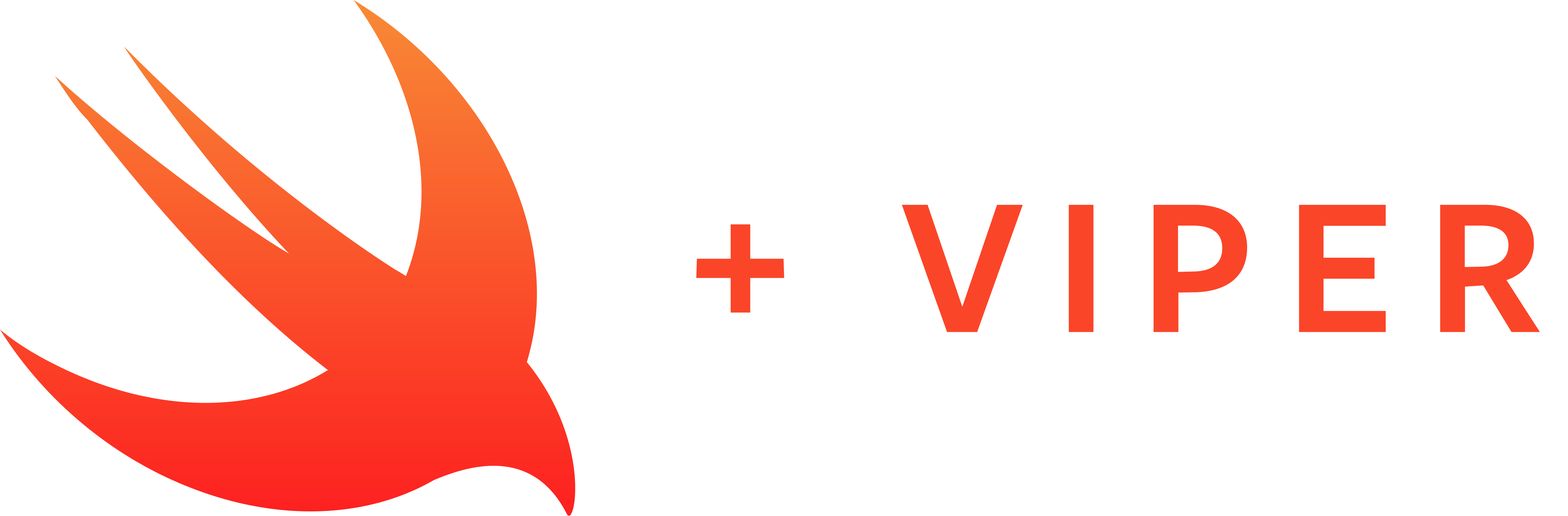
<style>
.page{position:relative;width:1568px;height:516px;background:#ffffff}
.page>*{position:absolute;margin:0}
.t1{font:203.3px "FreightSansProSemibold-Regular";letter-spacing:0.15em;color:#fb4528}
</style>
<div class="page">
<p class="t1" style="left:902px;top:205px;width:638px;height:127px">VIPER</p>
<p class="t1" style="left:696px;top:224px;width:88px;height:88px">+</p>
</div>
